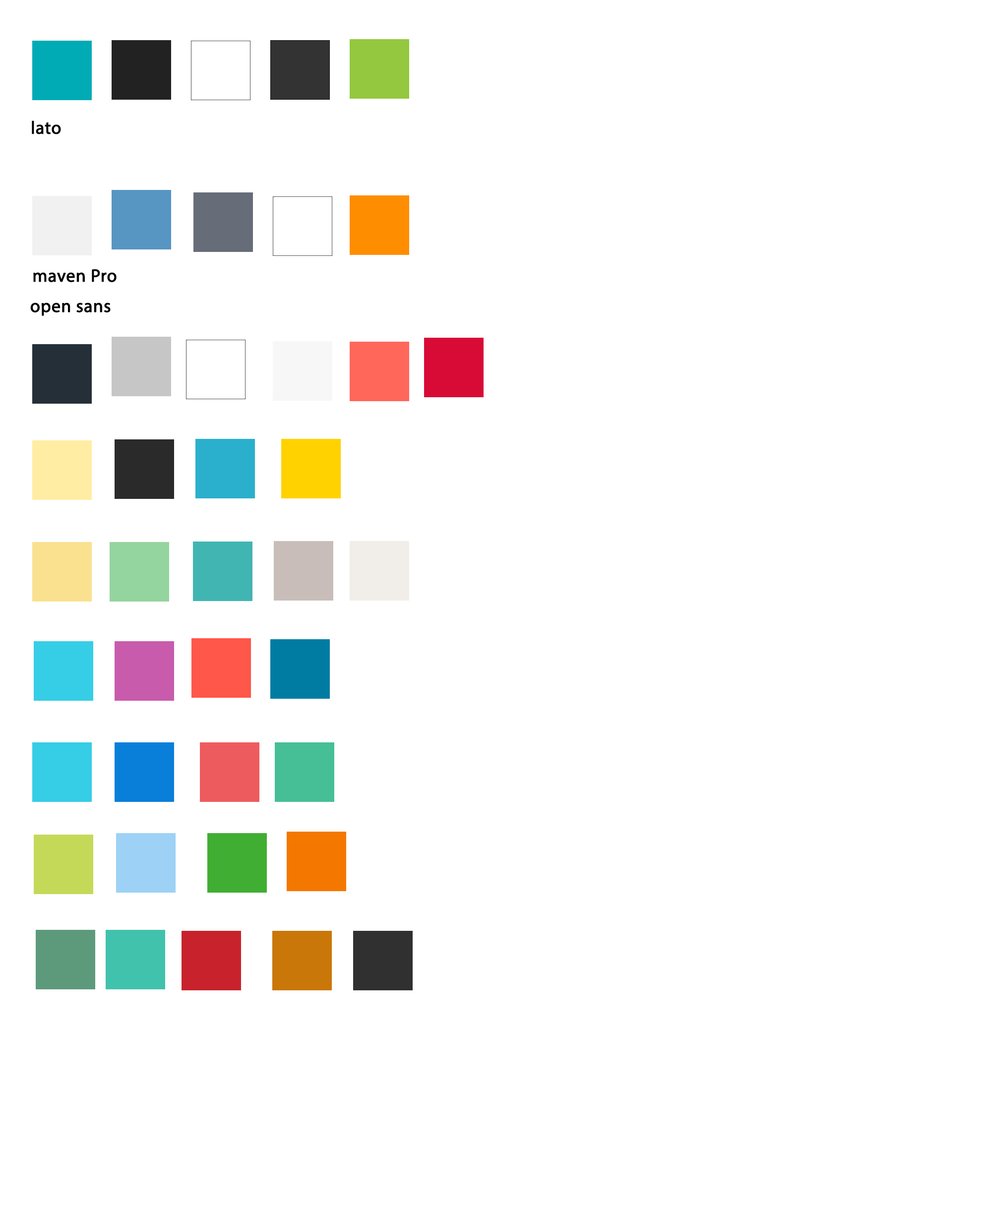
<style>
.page{position:relative;width:984px;height:1212px;background:#ffffff}
.page>*{position:absolute;margin:0}
.t1{font:17.9px "MyriadPro-Regular";letter-spacing:0.01em;color:#000000;font-weight:bold}
</style>
<div class="page">
<p class="t1" style="left:32px;top:121px;width:29px;height:13px">lato</p>
<p class="t1" style="left:33px;top:269px;width:84px;height:13px">maven Pro</p>
<p class="t1" style="left:30px;top:302px;width:81px;height:14px">open sans</p>
</div>
